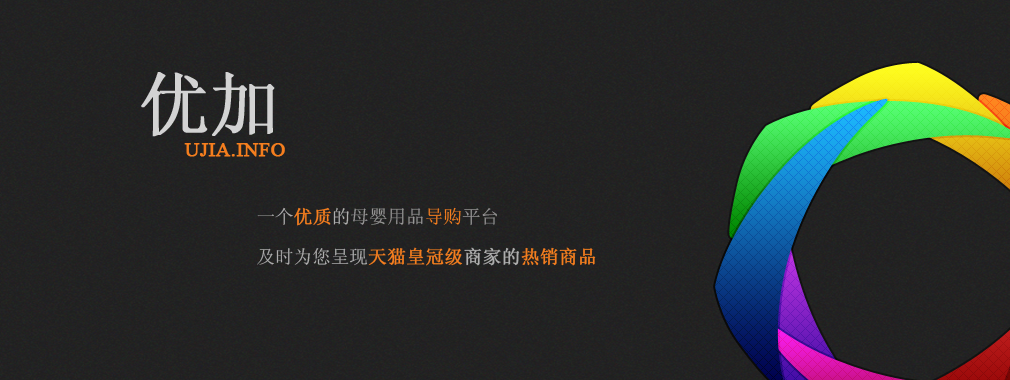
<style>
.page{position:relative;width:1010px;height:380px}
.page>*{position:absolute;margin:0}
.t1{font:68.9px "SimSun";letter-spacing:-0.02em;color:#d3d3d3;font-weight:bold}
.t2{font:20.2px "TimesNewRomanPSMT";color:#f57e1e;text-transform:uppercase;font-weight:bold}
.t3{font:18.6px "SimSun";color:#969595;text-transform:uppercase}
.t4{font:18.6px "SimSun";color:#aeaeae;text-transform:uppercase}
.t5{font:18.6px "SimSun";color:#f57e1e;text-transform:uppercase;font-weight:bold}
.t6{font:18.6px "SimSun";color:#f57e1e;text-transform:uppercase}
.t7{font:18.6px "SimSun";color:#aeaeae;text-transform:uppercase;font-weight:bold}
</style>
<div class="page">
<p class="t1" style="left:141px;top:72px;width:134px;height:65px">优加</p>
<p class="t2" style="left:184px;top:143px;width:101px;height:14px">ujia.inFo</p>
<p class="t3" style="left:257px;top:207px;width:240px;height:19px"><span class="t4">一个</span><span class="t5">优质</span><span class="t4">的</span>母婴用品<span class="t6">导购</span>平台</p>
<p class="t4" style="left:257px;top:247px;width:339px;height:19px">及时为您呈现<span class="t5">天猫皇冠级</span><span class="t7">商家的</span><span class="t5">热销商品</span></p>
</div>
